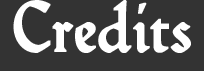
<style>
.page{position:relative;width:204px;height:71px;background:#333333}
.page>*{position:absolute;margin:0}
.t1{font:70.8px "Hamlet-Tertia18";color:#ffffff;font-weight:bold}
</style>
<div class="page">
<p class="t1" style="left:13px;top:0px;width:178px;height:53px">Credits</p>
</div>
